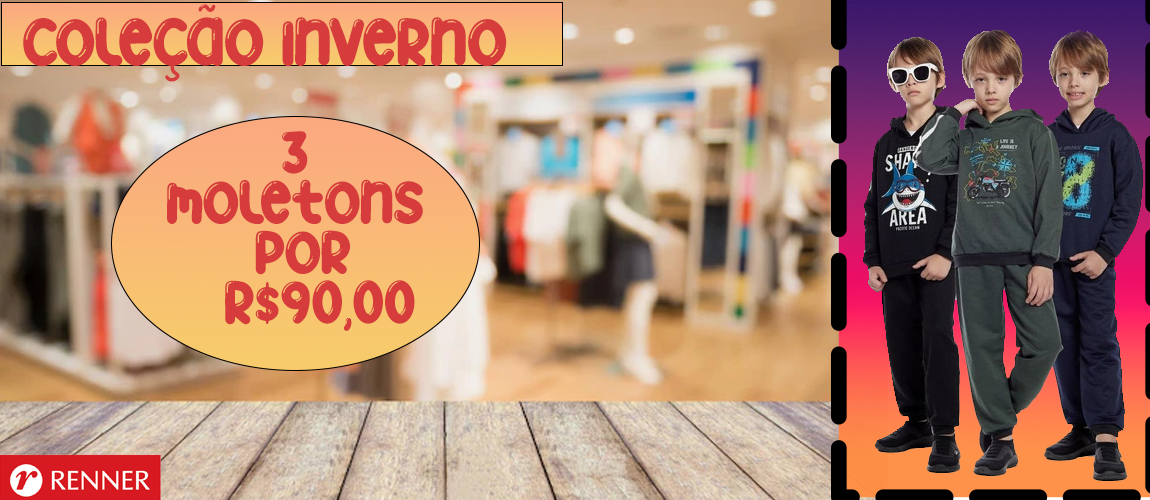
<style>
.page{position:relative;width:1150px;height:500px}
.page>*{position:absolute;margin:0}
.t1{font:45.8px "BALLOONDREAMS";color:#d63c3c}
.t2{font:41.7px "BALLOONDREAMS";color:#d63c3c}
</style>
<div class="page">
<p class="t1" style="left:23px;top:4px;width:484px;height:78px">Coleção Inverno</p>
<p class="t2" style="left:167px;top:131px;width:256px;height:200px;text-align:center">3<br>moletons<br> Por<br>   R$90,00</p>
</div>
